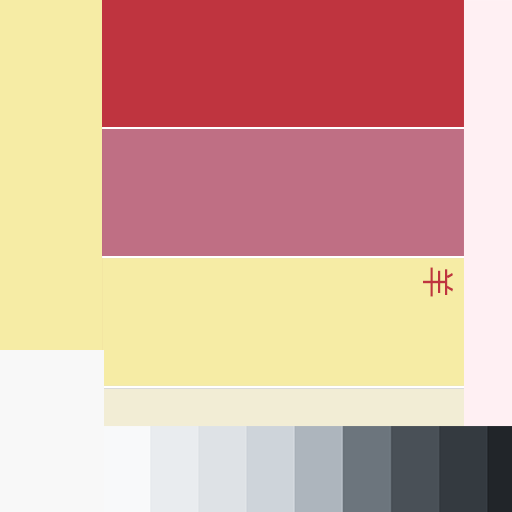
<style>
.page{position:relative;width:512px;height:512px;background:#f6eca5}
.page>*{position:absolute;margin:0}
.t1{font:32px "KozGoPr6N-Regular";color:#bf343f}
</style>
<div class="page">
<p class="t1" style="left:423px;top:267px;width:30px;height:30px;rotate:90deg">羊</p>
</div>
